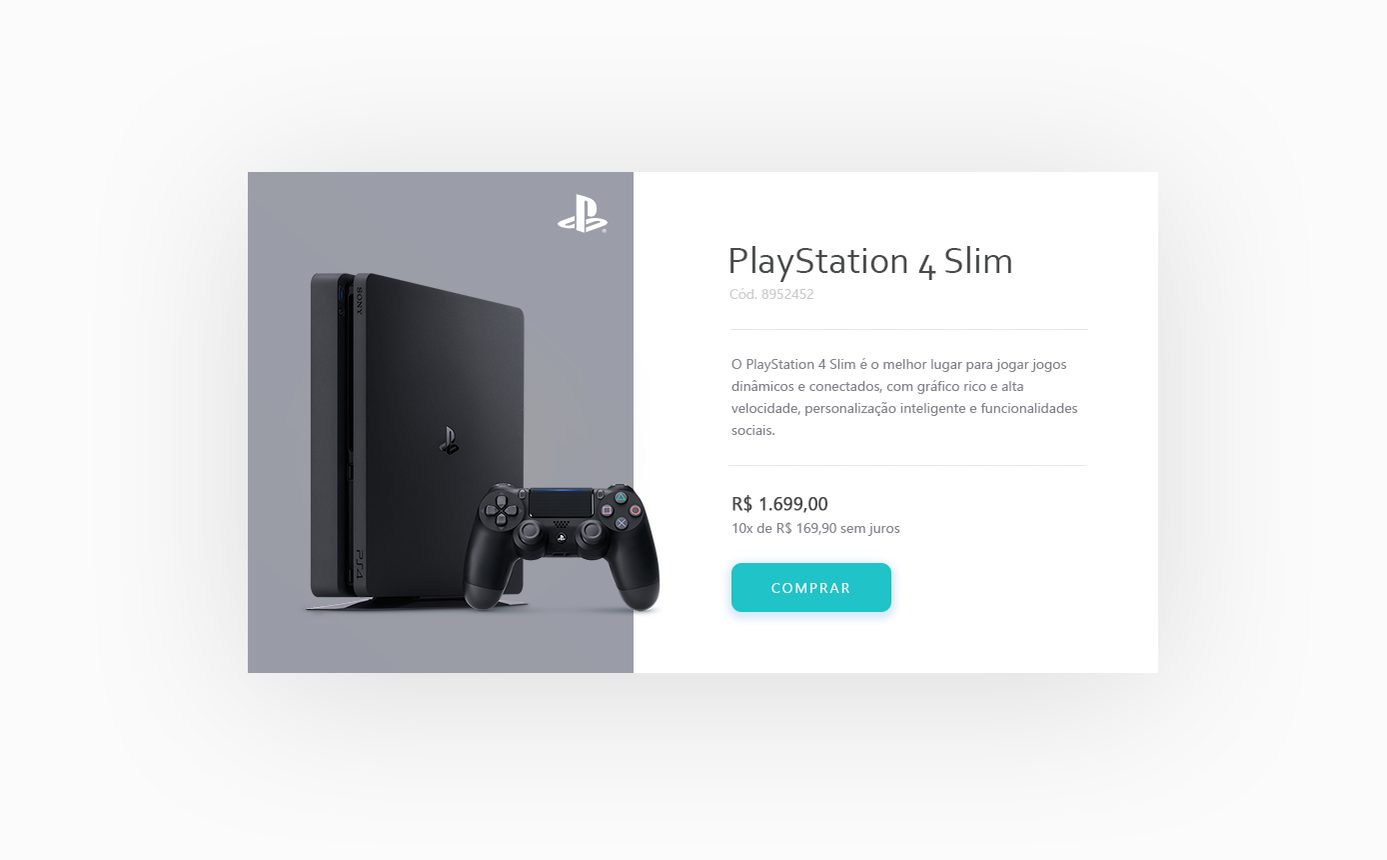
<style>
.page{position:relative;width:1387px;height:860px;background:#fbfbfb}
.page>*{position:absolute;margin:0}
.t1{font:38px "Corbel";color:#494a4a}
.t2{font:14px "Ebrima";color:#cbcbcb}
.t3{font:14px/22px "Ebrima";color:#808289}
.t4{font:18px "Ebrima";color:#494a4a;font-weight:bold}
.t5{font:14px "Ebrima";color:#808289}
.t6{font:14px "Ebrima";letter-spacing:0.15em;color:#ffffff;text-transform:uppercase}
</style>
<div class="page">
<p class="t1" style="left:731px;top:246px;width:280px;height:36px">PlayStation 4 Slim</p>
<p class="t2" style="left:730px;top:288px;width:85px;height:11px">Cód. 8952452</p>
<p class="t3" style="left:732px;top:358px;width:345px;height:77px">O PlayStation 4 Slim é o melhor lugar para jogar jogos dinâmicos e conectados, com gráfico rico e alta velocidade, personalização inteligente e funcionalidades sociais.</p>
<p class="t4" style="left:733px;top:495px;width:96px;height:18px">R$ 1.699,00</p>
<p class="t5" style="left:733px;top:522px;width:168px;height:14px">10x de R$ 169,90 sem juros</p>
<p class="t6" style="left:772px;top:583px;width:78px;height:10px">Comprar</p>
</div>
